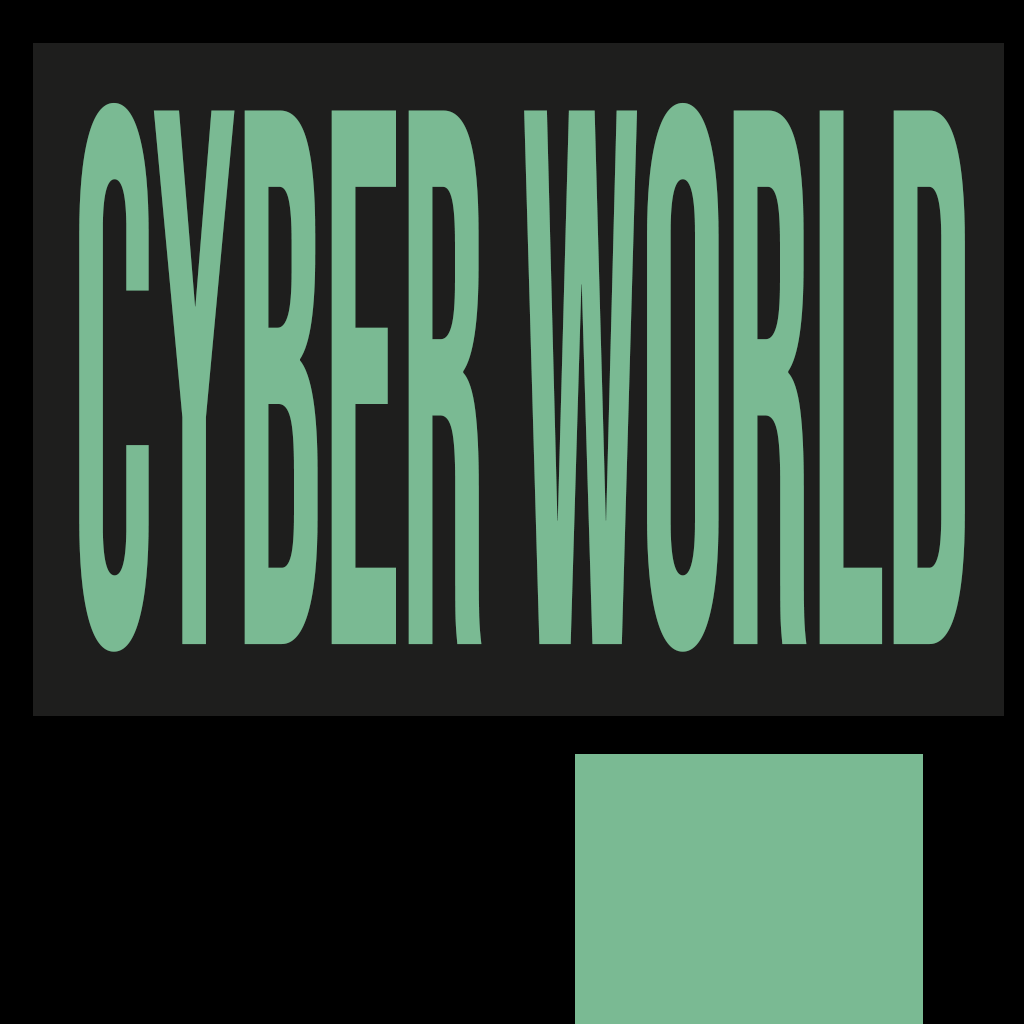
<style>
.page{position:relative;width:1024px;height:1024px;background:#1e1e1d}
.page>*{position:absolute;margin:0}
.t1{font:761.9px "BebasNeue-Regular";color:#7aba93;scale:0.28 1}
</style>
<div class="page">
<p class="t1" style="left:79px;top:102px;width:886px;height:550px">CYBER WORLD</p>
</div>
